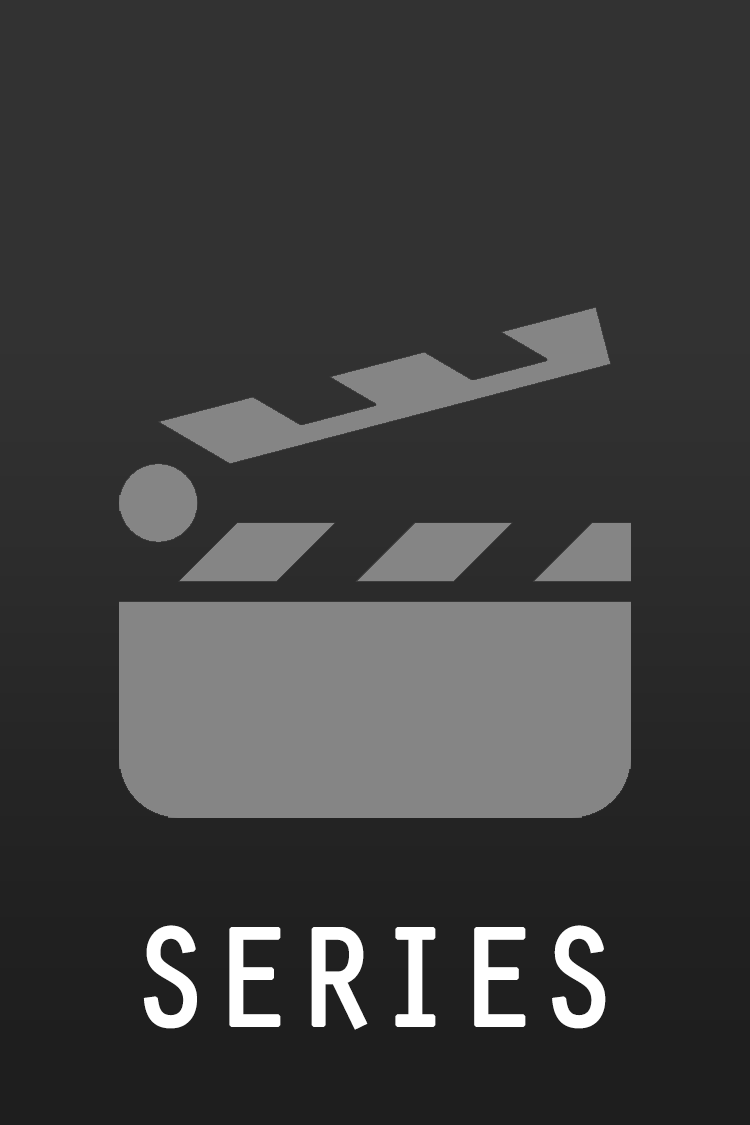
<style>
.page{position:relative;width:750px;height:1125px;background:#323232}
.page>*{position:absolute;margin:0}
.t1{font:144px "OratorStd";letter-spacing:-0.06em;color:#ffffff;font-weight:bold}
</style>
<div class="page">
<p class="t1" style="left:143px;top:925px;width:463px;height:105px">SERIES</p>
</div>
